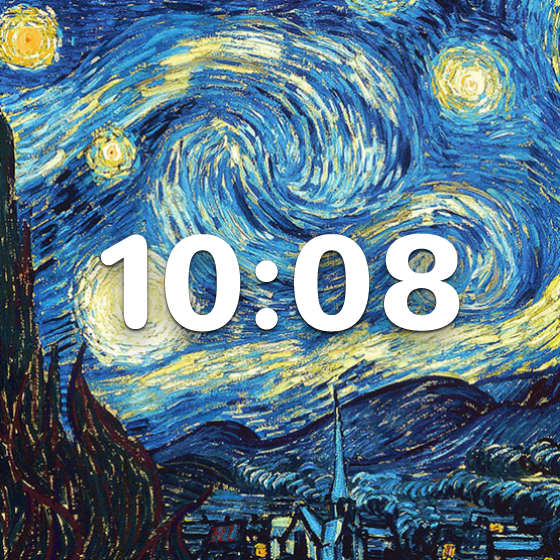
<style>
.page{position:relative;width:560px;height:560px}
.page>*{position:absolute;margin:0}
.t1{font:102px "NunitoClock-Bold";color:#ffffff}
</style>
<div class="page">
<p class="t1" style="left:100px;top:233px;width:360px;height:99px">10:08</p>
</div>
